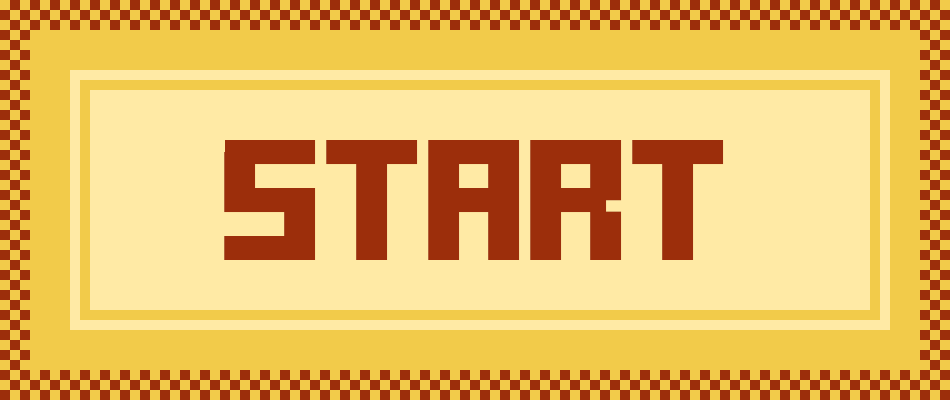
<style>
.page{position:relative;width:950px;height:400px;background:#ffeaa5}
.page>*{position:absolute;margin:0}
.t1{font:96px "FFFForward";letter-spacing:-0.025em;color:#9c2e0b;scale:1.25 1}
</style>
<div class="page">
<p class="t1" style="left:224px;top:140px;width:500px;height:120px">START</p>
</div>
